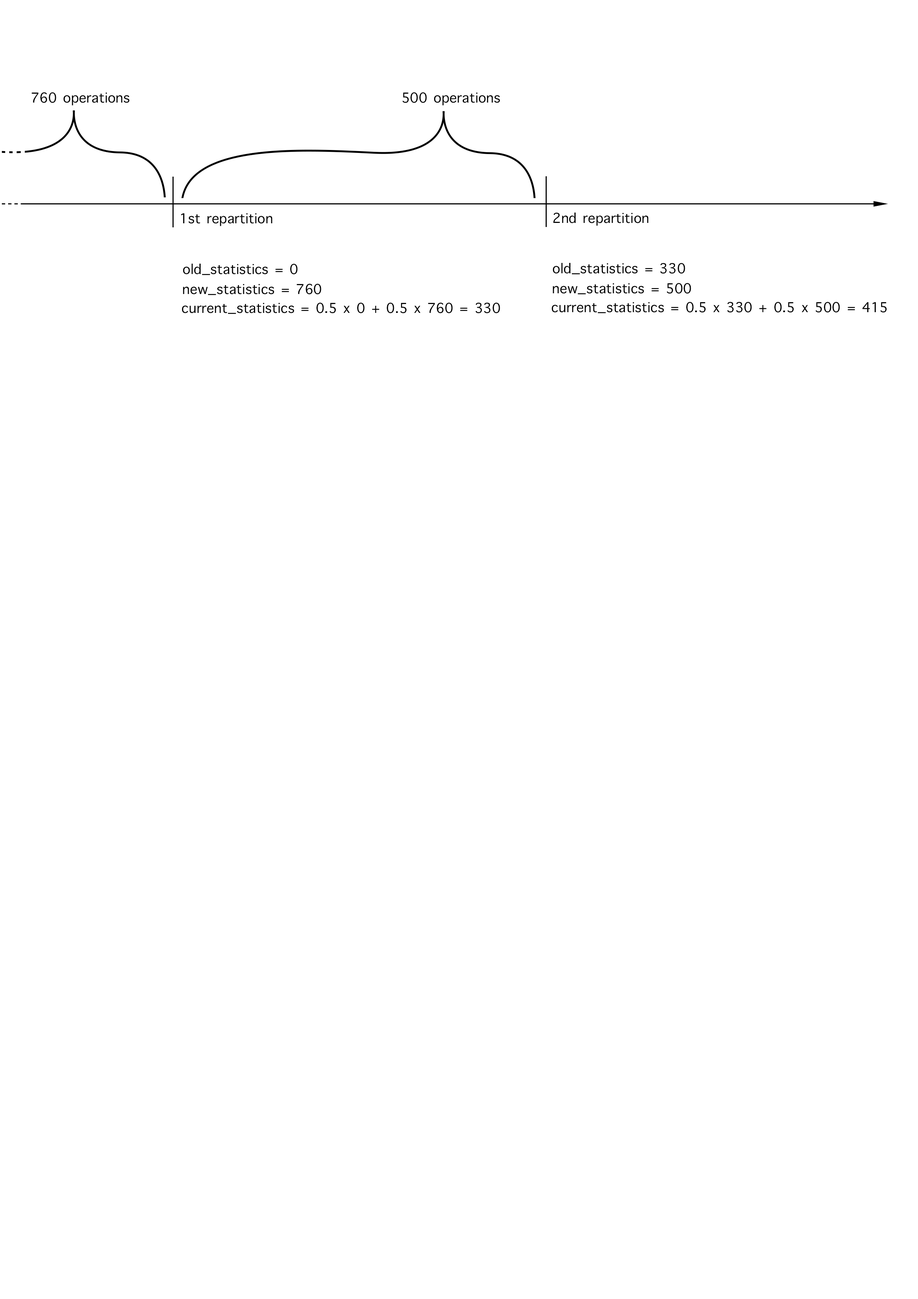
<style>
.page{position:relative;width:918px;height:1299px;background:#ffffff}
.page>*{position:absolute;margin:0}
.t1{font:4.4px "AppleSymbols";color:#000000}
.t2{font:18.5px "AppleSymbols";color:#000000}
</style>
<div class="page">
<p class="t1" style="left:31px;top:92px;width:99px;height:14px">760 operations</p>
<p class="t1" style="left:402px;top:92px;width:98px;height:14px">500 operations</p>
<p class="t2" style="left:181px;top:213px;width:91px;height:13px">1st repartition</p>
<p class="t2" style="left:553px;top:213px;width:96px;height:13px">2nd repartition</p>
<p class="t2" style="left:183px;top:264px;width:115px;height:11px">old_statistics = 0</p>
<p class="t2" style="left:553px;top:263px;width:132px;height:11px">old_statistics = 330</p>
<p class="t2" style="left:183px;top:284px;width:138px;height:11px">new_statistics = 760</p>
<p class="t2" style="left:553px;top:283px;width:138px;height:11px">new_statistics = 500</p>
<p class="t2" style="left:182px;top:302px;width:318px;height:12px">current_statistics = 0.5 x 0 + 0.5 x 760 = 330</p>
<p class="t2" style="left:552px;top:302px;width:335px;height:11px">current_statistics = 0.5 x 330 + 0.5 x 500 = 415</p>
</div>
